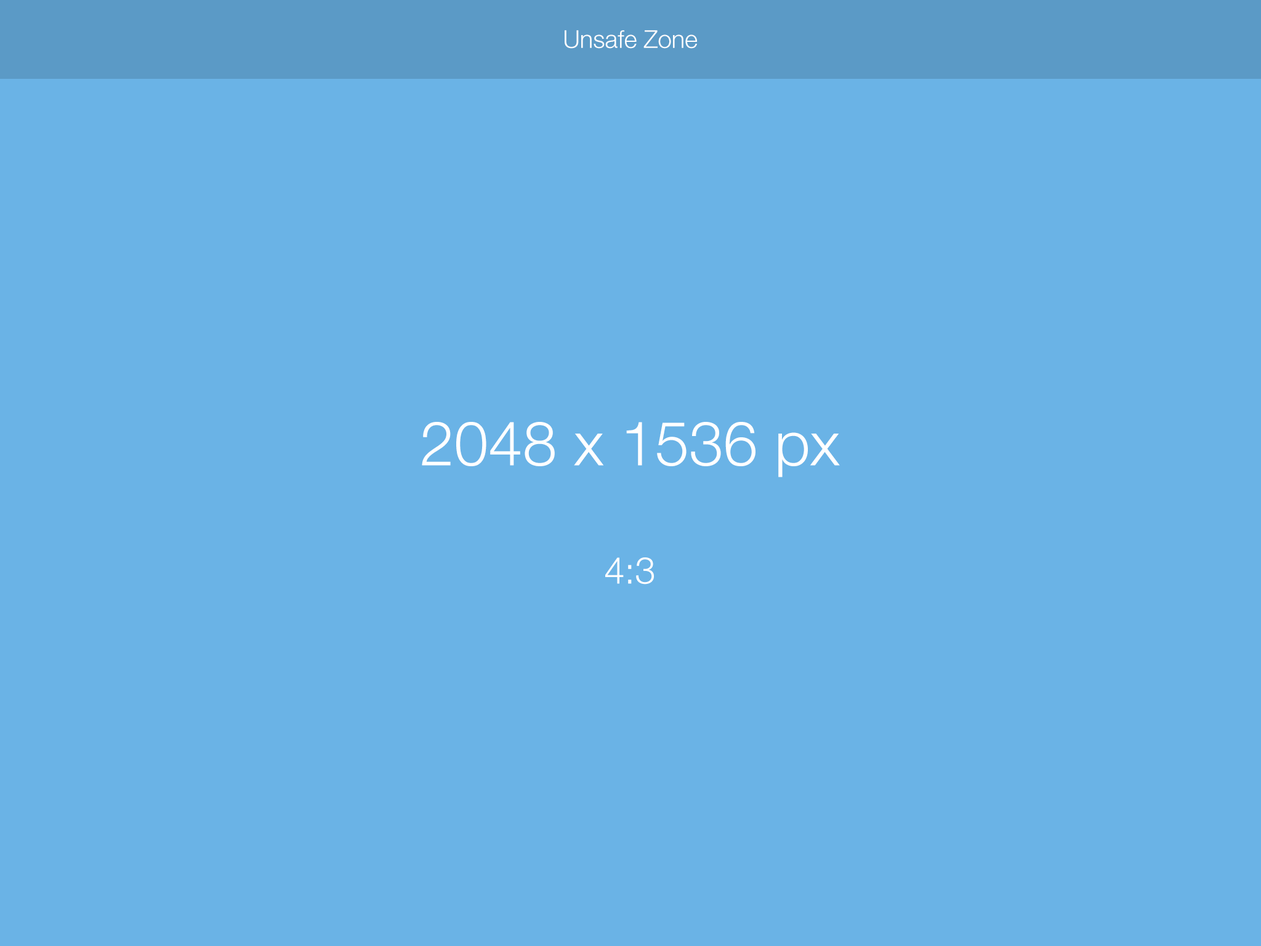
<style>
.page{position:relative;width:1261px;height:946px;background:#6ab3e6}
.page>*{position:absolute;margin:0}
.t1{font:24.6px "HelveticaNeue-Light";color:#ffffff}
.t2{font:61.6px "HelveticaNeue-Light";color:#ffffff}
.t3{font:36.9px "HelveticaNeue-Light";color:#ffffff}
</style>
<div class="page">
<p class="t1" style="left:565px;top:30px;width:132px;height:19px">Unsafe Zone</p>
<p class="t2" style="left:422px;top:422px;width:418px;height:162px;text-align:center">2048 x 1536 px<br><br><span class="t3">4:3</span></p>
</div>
